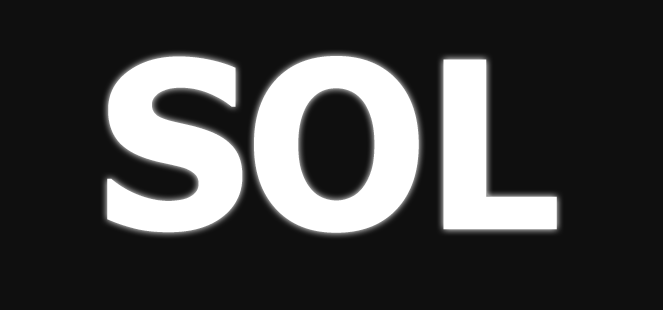
<style>
.page{position:relative;width:663px;height:310px;background:#0f0f0f}
.page>*{position:absolute;margin:0}
.t1{font:233px "Tahoma-Bold";color:#ffffff}
</style>
<div class="page">
<p class="t1" style="left:107px;top:56px;width:450px;height:177px">SOL</p>
</div>
